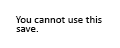
<style>
.page{position:relative;width:120px;height:48px;background:#ffffff}
.page>*{position:absolute;margin:0}
.t1{font:11px "Calibri";color:#080808}
</style>
<div class="page">
<p class="t1" style="left:15px;top:16px;width:87px;height:7px">You cannot use this</p>
<p class="t1" style="left:16px;top:27px;width:22px;height:5px">save.</p>
</div>
